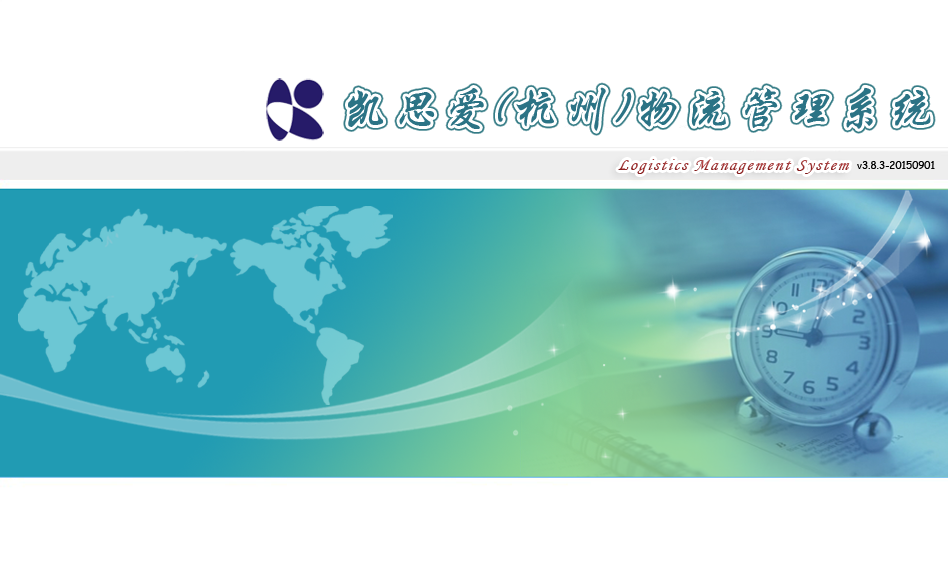
<style>
.page{position:relative;width:948px;height:570px;background:#ffffff}
.page>*{position:absolute;margin:0}
.t1{font:46.3px "STXingkai";letter-spacing:0.1em;color:#2b7385;font-style:italic}
.t2{font:17.3px "MonotypeCorsiva";letter-spacing:0.1em;font-style:italic}
.t3{font:10px "ComicSansMS";color:#000000}
</style>
<div class="page">
<p class="t1" style="left:348px;top:87px;width:583px;height:44px">凯思爱(杭州)物流管理系统</p>
<p class="t2" style="left:618px;top:159px;width:232px;height:15px">Logistics Management System</p>
<p class="t3" style="left:857px;top:161px;width:78px;height:8px">v3.8.3-20150901</p>
</div>
